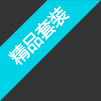
<style>
.page{position:relative;width:101px;height:101px;background:#333333}
.page>*{position:absolute;margin:0}
.t1{font:18px "MicrosoftYaHei";color:#ffffff}
</style>
<div class="page">
<p class="t1" style="left:8px;top:6px;width:62px;height:59px;rotate:-44deg">精品套装</p>
</div>
